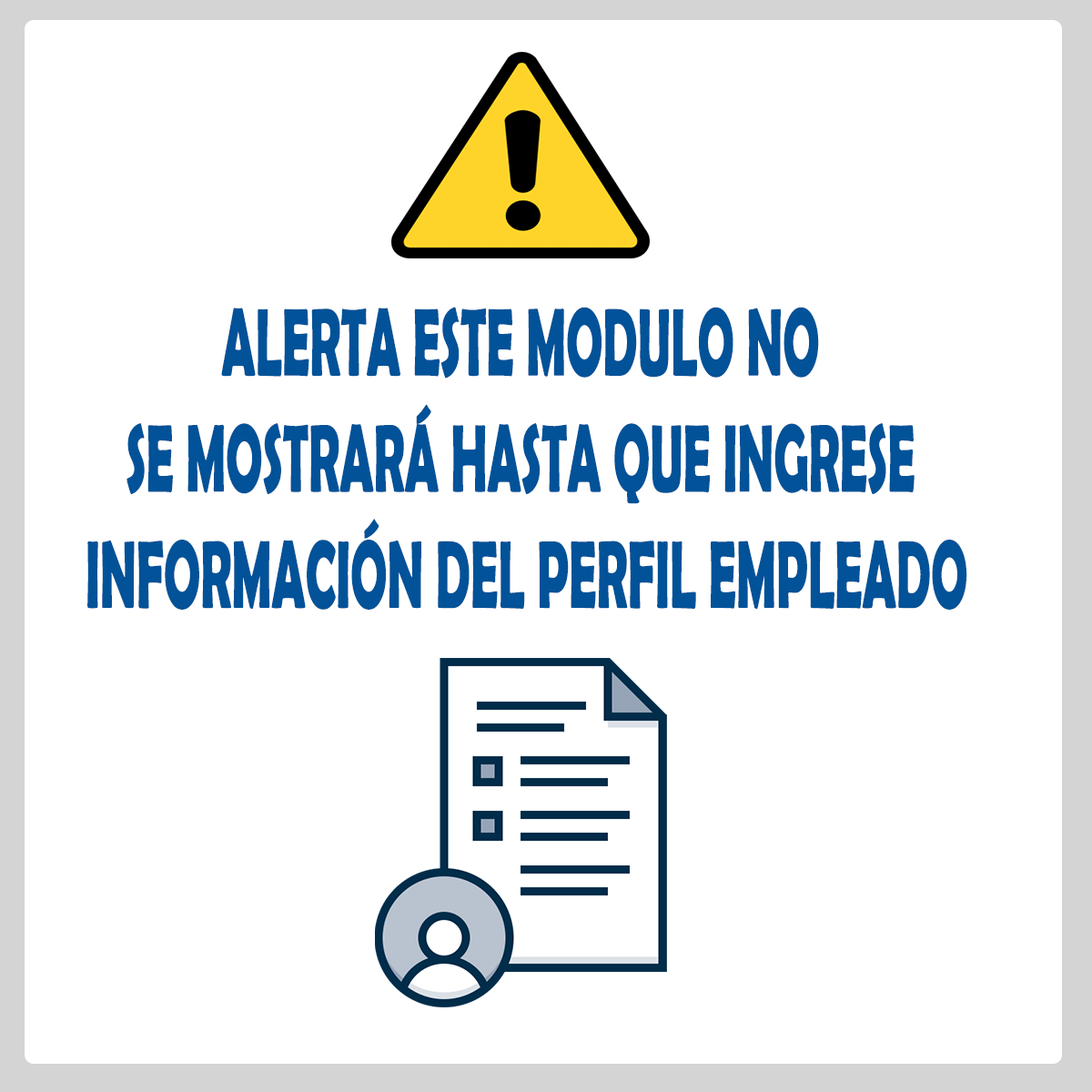
<style>
.page{position:relative;width:1092px;height:1092px;background:#ffffff}
.page>*{position:absolute;margin:0}
.t1{font:96.8px "BerlinSansFBDemi-Bold";color:#015298;scale:0.5 1}
</style>
<div class="page">
<p class="t1" style="left:87px;top:307px;width:880px;height:303px;text-align:center">ALERTA ESTE MODULO NO <br>SE MOSTRARÁ HASTA QUE INGRESE<br> INFORMACIÓN DEL PERFIL EMPLEADO</p>
</div>
